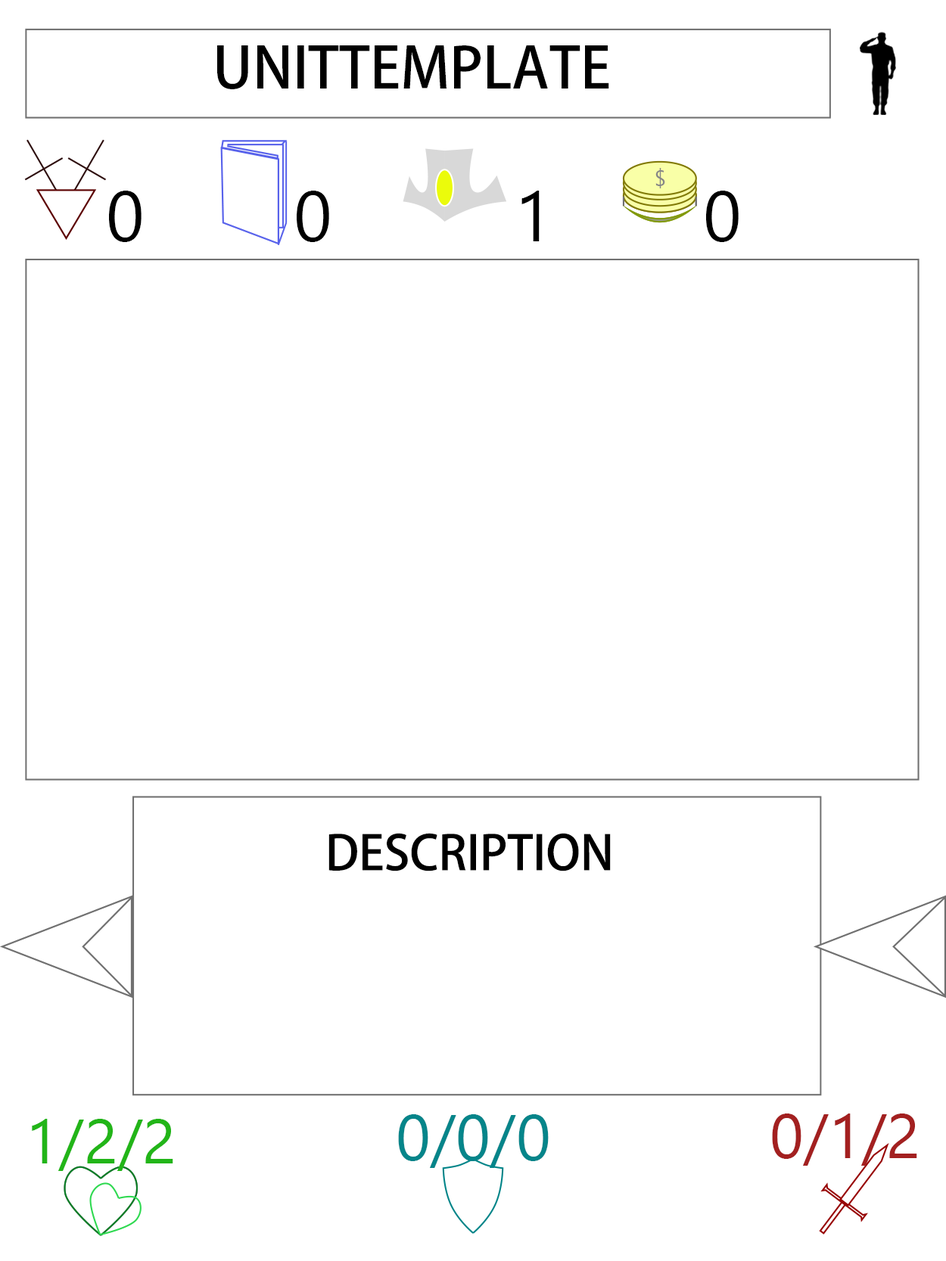
<style>
.page{position:relative;width:946px;height:1261px;background:#ffffff}
.page>*{position:absolute;margin:0}
.t1{font:56.7px "AdobeHeitiStd-Regular";color:#000000}
.t2{font:70.9px "SegoeUI";color:#000000}
.t3{font:47.3px "AdobeHeitiStd-Regular";color:#000000}
.t4{font:63px "SegoeUI";color:#22b518}
.t5{font:64.6px "SegoeUI";color:#05868a}
.t6{font:63px "SegoeUI";color:#a32020}
</style>
<div class="page">
<p class="t1" style="left:217px;top:45px;width:392px;height:44px">UNITTEMPLATE</p>
<p class="t2" style="left:109px;top:191px;width:32px;height:51px">0</p>
<p class="t2" style="left:297px;top:191px;width:32px;height:51px">0</p>
<p class="t2" style="left:521px;top:191px;width:18px;height:50px">1</p>
<p class="t2" style="left:706px;top:191px;width:32px;height:51px">0</p>
<p class="t3" style="left:328px;top:833px;width:282px;height:38px">DESCRIPTION</p>
<p class="t4" style="left:32px;top:1119px;width:141px;height:52px">1/2/2</p>
<p class="t5" style="left:398px;top:1114px;width:150px;height:54px">0/0/0</p>
<p class="t6" style="left:772px;top:1114px;width:145px;height:52px">0/1/2</p>
</div>
